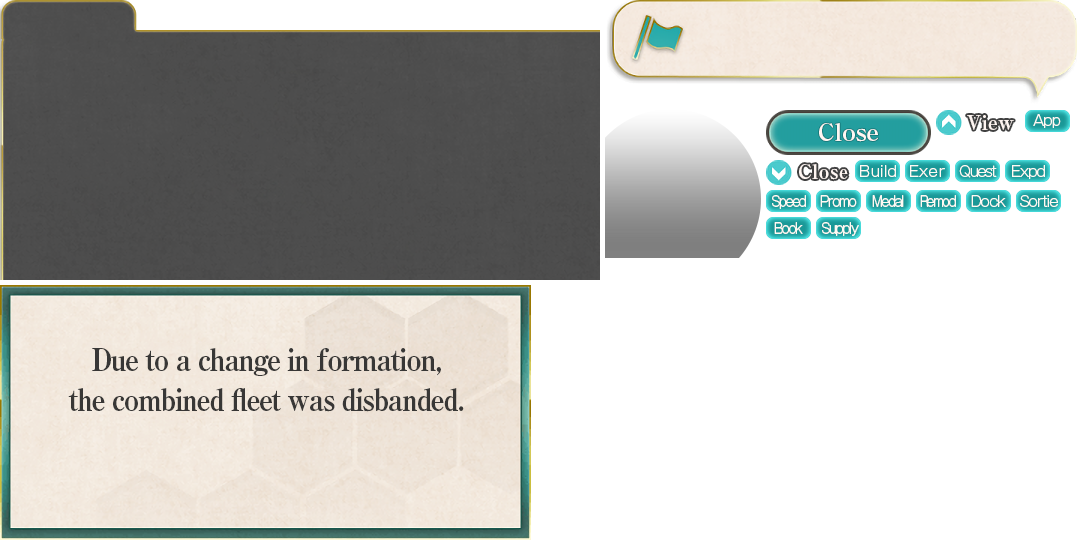
<style>
.page{position:relative;width:1077px;height:540px;background:#ffffff}
.page>*{position:absolute;margin:0}
.t1{font:15px "GothicMB101Pro-Light";letter-spacing:-0.08em;color:#fffaf4}
.t2{font:15px "GothicMB101Pro-Light";color:#fffaf4}
.t3{font:15px "GothicMB101Pro-Light";letter-spacing:-0.12em;color:#fffaf4}
.t4{font:15px "GothicMB101Pro-Light";letter-spacing:-0.12em;color:#fffaf4;scale:0.87 1}
.t5{font:15px "GothicMB101Pro-Light";letter-spacing:-0.12em;color:#fffaf4;scale:0.82 1}
.t6{font:31px/40px "RyuminPro-ExBold";letter-spacing:-0.06em;color:#383736;scale:0.9 1}
</style>
<div class="page">
<p class="t1" style="left:1033px;top:114px;width:28px;height:14px">App</p>
<p class="t2" style="left:860px;top:165px;width:36px;height:12px">Build</p>
<p class="t2" style="left:910px;top:165px;width:35px;height:12px">Exer</p>
<p class="t3" style="left:959px;top:165px;width:38px;height:13px">Quest</p>
<p class="t1" style="left:1012px;top:165px;width:33px;height:14px">Expd</p>
<p class="t4" style="left:772px;top:195px;width:34px;height:14px">Speed</p>
<p class="t4" style="left:820px;top:195px;width:37px;height:12px">Promo</p>
<p class="t4" style="left:872px;top:195px;width:32px;height:12px">Medal</p>
<p class="t5" style="left:920px;top:195px;width:36px;height:12px">Remod</p>
<p class="t1" style="left:971px;top:195px;width:35px;height:12px">Dock</p>
<p class="t1" style="left:1020px;top:195px;width:38px;height:12px">Sortie</p>
<p class="t4" style="left:774px;top:222px;width:29px;height:12px">Book</p>
<p class="t4" style="left:822px;top:222px;width:37px;height:14px">Supply</p>
<p class="t6" style="left:68px;top:348px;width:396px;height:64px;text-align:center">Due to a change in formation,<br>the combined fleet was disbanded.</p>
</div>
